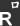
<style>
.page{position:relative;width:20px;height:26px;background:#333333}
.page>*{position:absolute;margin:0}
.t1{font:12px "DFKaiShu-SB-Estd-BF";color:#ffffff;font-weight:bold}
.t2{font:18px "ArialMT";color:#ffffff;font-weight:bold}
</style>
<div class="page">
<p class="t1" style="left:11px;top:1px;width:8px;height:8px">口</p>
<p class="t2" style="left:0px;top:12px;width:12px;height:14px">R</p>
</div>
